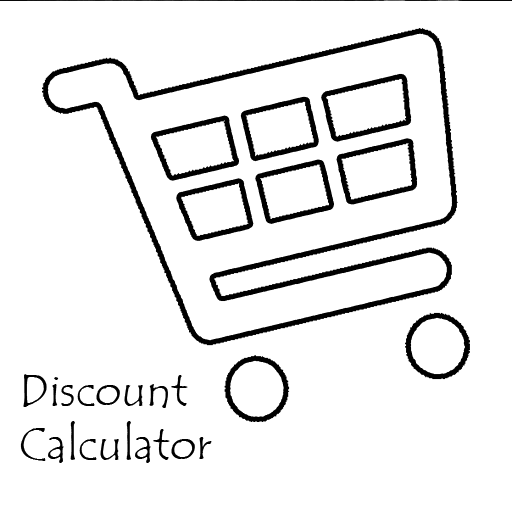
<style>
.page{position:relative;width:512px;height:512px;background:#ffffff}
.page>*{position:absolute;margin:0}
.t1{font:45px "TempusSansITC";color:#000000}
</style>
<div class="page">
<p class="t1" style="left:20px;top:373px;width:192px;height:89px">Discount<br>Calculator</p>
</div>
